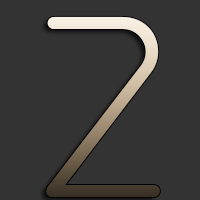
<style>
.page{position:relative;width:200px;height:200px;background:#333333}
.page>*{position:absolute;margin:0}
.t1{font:237.9px "GreyscaleBasic-Regular"}
</style>
<div class="page">
<p class="t1" style="left:46px;top:16px;width:114px;height:181px">2</p>
</div>
